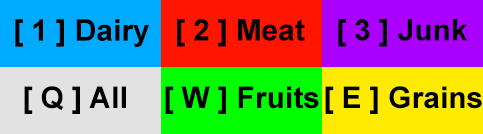
<style>
.page{position:relative;width:483px;height:134px}
.page>*{position:absolute;margin:0}
.t1{font:30px "Arial-BoldMT";color:#000000}
</style>
<div class="page">
<p class="t1" style="left:15px;top:19px;width:134px;height:28px">[ 1 ] Dairy</p>
<p class="t1" style="left:177px;top:19px;width:128px;height:28px">[ 2 ] Meat</p>
<p class="t1" style="left:338px;top:19px;width:129px;height:28px">[ 3 ] Junk</p>
<p class="t1" style="left:24px;top:86px;width:102px;height:28px">[ Q ] All</p>
<p class="t1" style="left:165px;top:86px;width:154px;height:28px">[ W ] Fruits</p>
<p class="t1" style="left:325px;top:86px;width:157px;height:28px">[ E ] Grains</p>
</div>
